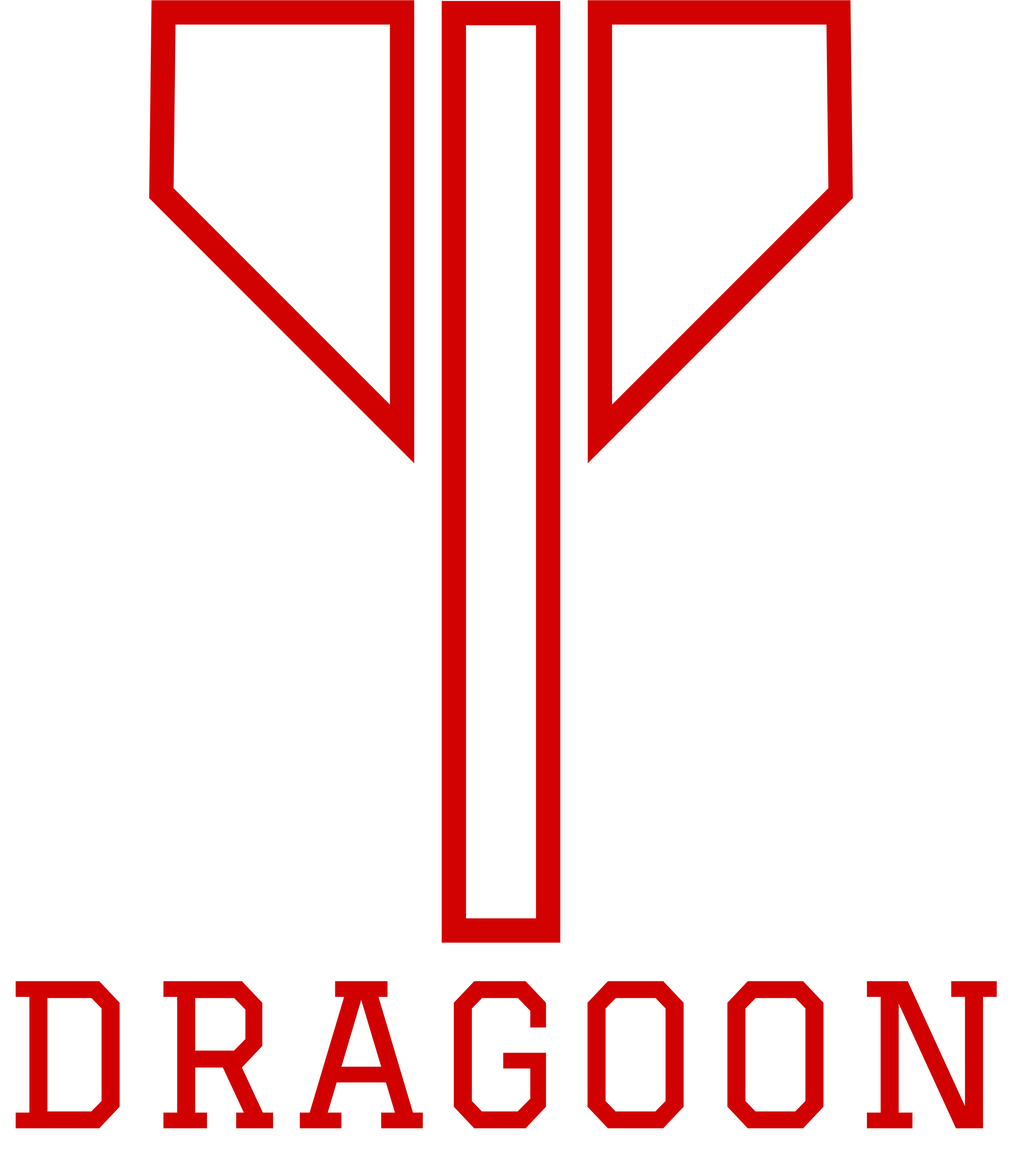
<style>
.page{position:relative;width:1023px;height:1165px;background:#ffffff}
.page>*{position:absolute;margin:0}
.t1{font:196.1px "Graduate-Regular";letter-spacing:0.063em;color:#d30202}
</style>
<div class="page">
<p class="t1" style="left:15px;top:981px;width:982px;height:147px">DRAGOON</p>
</div>
